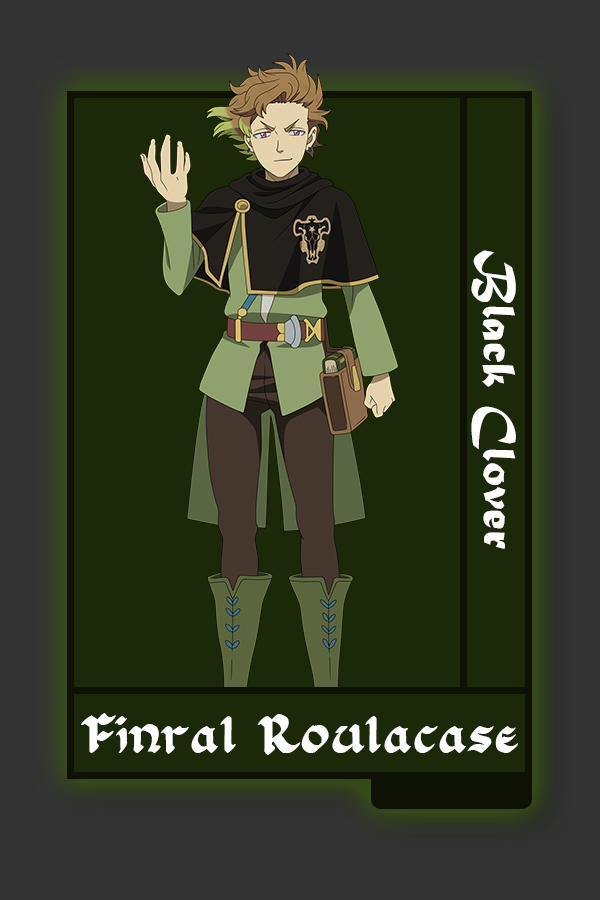
<style>
.page{position:relative;width:600px;height:900px;background:#1b2908}
.page>*{position:absolute;margin:0}
.t1{font:48.8px "MaturaMTScriptCapitals";color:#ffffff}
.t2{font:44.9px "FloranteatLaura";color:#ffffff}
</style>
<div class="page">
<p class="t1" style="left:471px;top:250px;width:45px;height:299px;rotate:90deg">Black Clover</p>
<p class="t2" style="left:81px;top:713px;width:437px;height:42px">Finral Roulacase</p>
</div>
